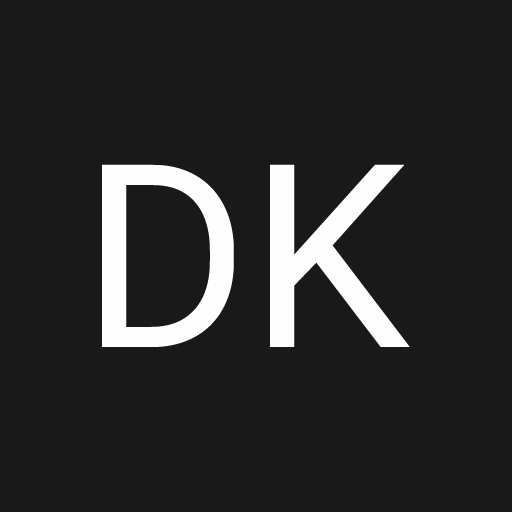
<style>
.page{position:relative;width:512px;height:512px;background:#191919}
.page>*{position:absolute;margin:0}
.t1{font:256px "Roboto-Regular";color:#fefefe}
</style>
<div class="page">
<p class="t1" style="left:102px;top:164px;width:308px;height:183px">DK</p>
</div>
